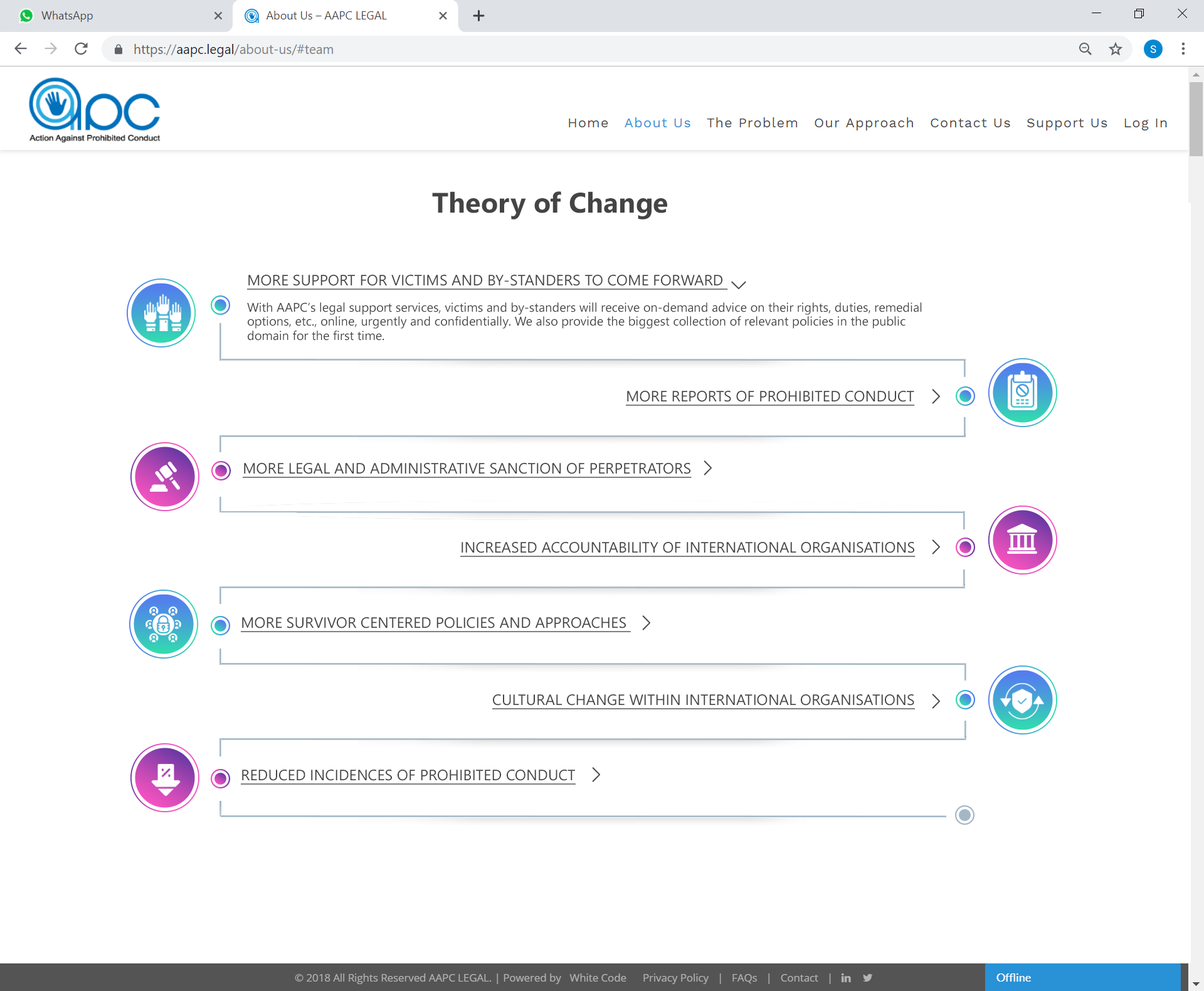
<style>
.page{position:relative;width:1204px;height:991px;background:#ffffff}
.page>*{position:absolute;margin:0}
.t1{font:28.2px "SegoeUI-Bold";color:#444444}
.t2{font:15px "SegoeUI";color:#444444;text-transform:uppercase;text-decoration:underline}
.t3{font:12.5px/14.1px "SegoeUI";color:#444444}
</style>
<div class="page">
<p class="t1" style="left:432px;top:191px;width:235px;height:28px">Theory of Change</p>
<p class="t2" style="left:247px;top:275px;width:481px;height:15px">More support for victims and by-standers to come forward</p>
<p class="t3" style="left:247px;top:302px;width:675px;height:38px;text-align:right">With AAPC’s legal support services, victims and by-standers will receive on-demand advice on their rights, duties, remedial options, etc., online, urgently and confidentially. We also provide the biggest collection of relevant policies in the public domain for the first time.</p>
<p class="t2" style="left:626px;top:391px;width:289px;height:15px">More reports of prohibited conduct</p>
<p class="t2" style="left:243px;top:463px;width:449px;height:15px">More legal and administrative sanction of perpetrators</p>
<p class="t2" style="left:460px;top:542px;width:455px;height:15px">Increased accountability of international organisations</p>
<p class="t2" style="left:241px;top:617px;width:390px;height:15px">More survivor centered policies and approaches</p>
<p class="t2" style="left:492px;top:694px;width:423px;height:15px">Cultural change within international organisations</p>
<p class="t2" style="left:241px;top:769px;width:335px;height:15px">Reduced incidences of prohibited conduct</p>
</div>
